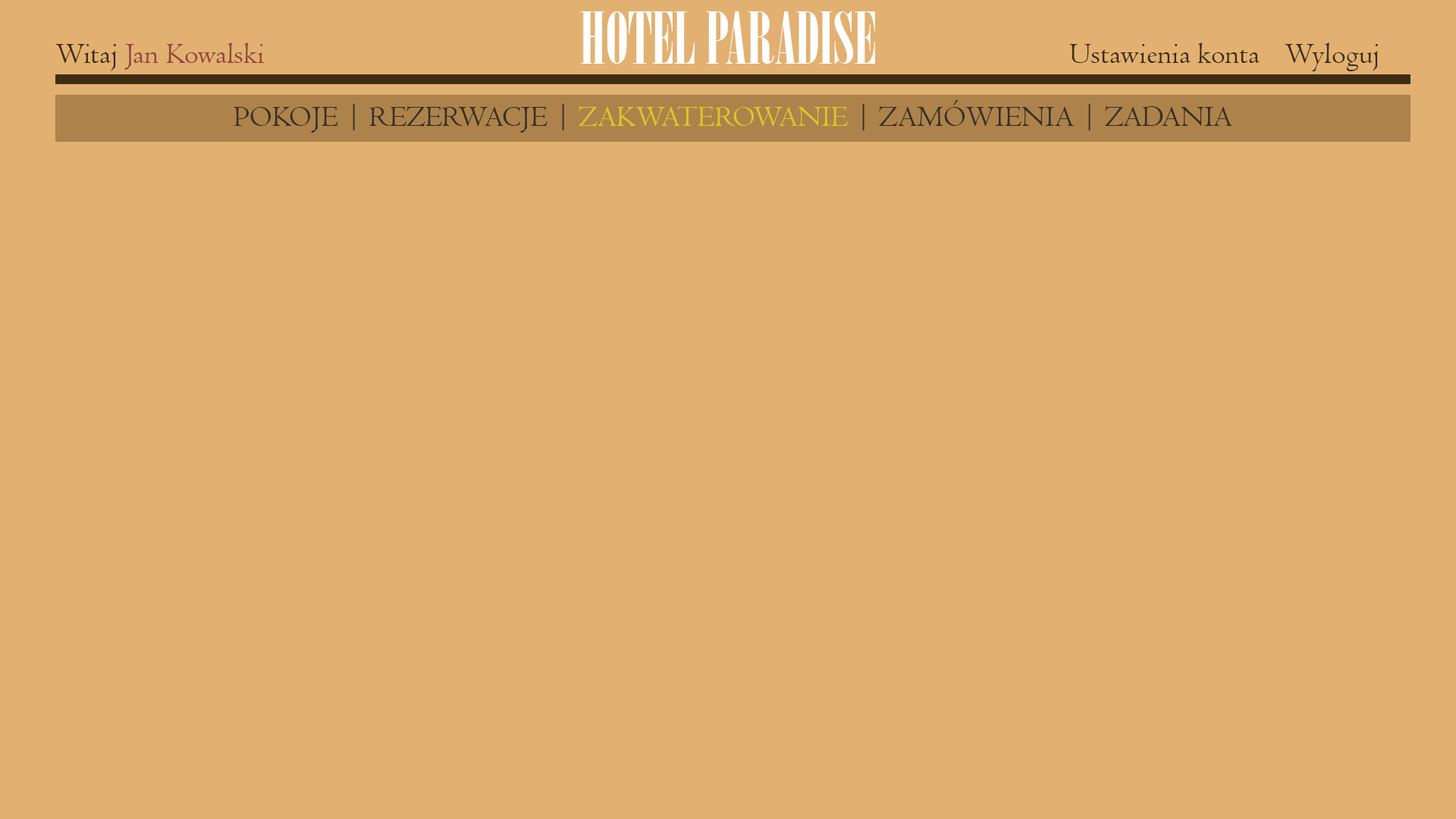
<style>
.page{position:relative;width:1456px;height:819px;background:#e2b171}
.page>*{position:absolute;margin:0}
.t1{font:71.3px "Onyx";color:#ffffff}
.t2{font:30.3px "Centaur";color:#93443e}
.t3{font:30.3px "Centaur";color:#3f2c13}
.t4{font:30.3px "Centaur";color:#352f28}
.t5{font:30.3px "Centaur";color:#e0c725}
</style>
<div class="page">
<p class="t1" style="left:580px;top:11px;width:295px;height:53px">HOTEL PARADISE</p>
<p class="t2" style="left:55px;top:42px;width:210px;height:29px"><span class="t3">Witaj </span>Jan Kowalski</p>
<p class="t3" style="left:1069px;top:42px;width:191px;height:21px">Ustawienia konta</p>
<p class="t3" style="left:1285px;top:42px;width:93px;height:29px">Wyloguj</p>
<p class="t4" style="left:234px;top:100px;width:998px;height:33px">POKOJE | REZERWACJE |<span class="t5"> ZAKWATEROWANIE</span> | ZAMÓWIENIA | ZADANIA</p>
</div>
